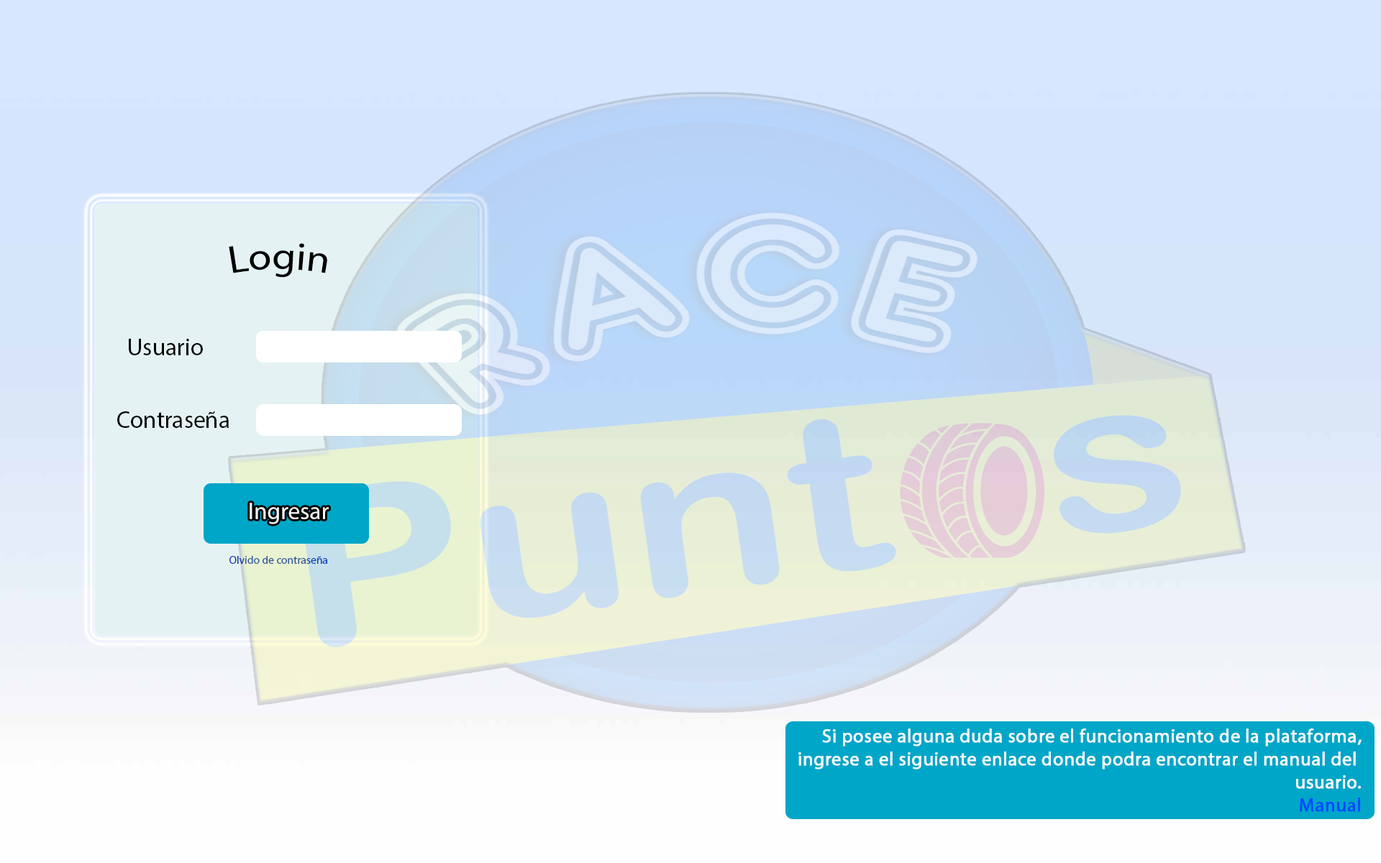
<style>
.page{position:relative;width:1381px;height:863px}
.page>*{position:absolute;margin:0}
.t1{font:38.4px "MyriadPro-Regular";color:#000000}
.t2{font:24px "MyriadPro-Regular";color:#030303}
.t3{font:24px "MyriadPro-Regular";color:#f9fafa}
.t4{font:11.2px "MyriadPro-Regular"}
.t5{font:19.2px "MyriadPro-Regular";color:#fafbfe;font-weight:bold}
.t6{font:19.2px "MyriadPro-Regular";color:#0049ff;font-weight:bold}
</style>
<div class="page">
<p class="t1" style="left:229px;top:243px;width:98px;height:35px">Login</p>
<p class="t2" style="left:129px;top:339px;width:74px;height:16px">Usuario</p>
<p class="t2" style="left:117px;top:412px;width:112px;height:16px">Contraseña</p>
<p class="t3" style="left:250px;top:503px;width:79px;height:21px">Ingresar</p>
<p class="t4" style="left:229px;top:556px;width:98px;height:8px">Olvido de contraseña</p>
<p class="t5" style="left:799px;top:729px;width:563px;height:83px;text-align:right">Si posee alguna duda sobre el funcionamiento de la plataforma,<br> ingrese a el siguiente enlace donde podra encontrar el manual del <br>usuario.<br><span class="t6">Manual</span></p>
</div>
